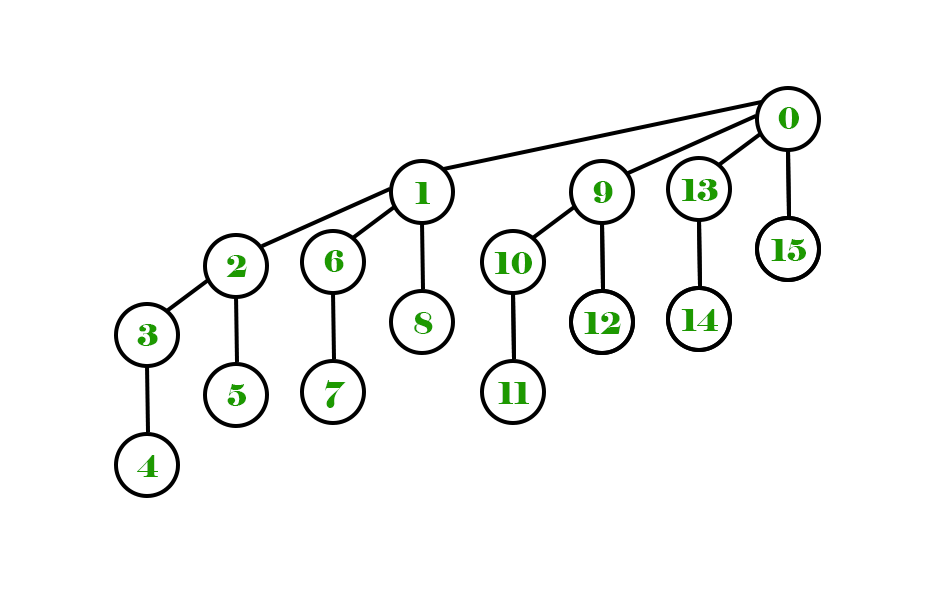
<style>
.page{position:relative;width:932px;height:592px;background:#ffffff}
.page>*{position:absolute;margin:0}
.t1{font:30px "Elephant-Regular";color:#1d9900}
</style>
<div class="page">
<p class="t1" style="left:778px;top:107px;width:21px;height:22px">0</p>
<p class="t1" style="left:415px;top:182px;width:15px;height:22px">1</p>
<p class="t1" style="left:593px;top:181px;width:20px;height:22px">9</p>
<p class="t1" style="left:681px;top:179px;width:37px;height:22px">13</p>
<p class="t1" style="left:771px;top:239px;width:35px;height:22px">15</p>
<p class="t1" style="left:226px;top:255px;width:21px;height:22px">2</p>
<p class="t1" style="left:324px;top:250px;width:20px;height:22px">6</p>
<p class="t1" style="left:494px;top:252px;width:38px;height:22px">10</p>
<p class="t1" style="left:414px;top:312px;width:19px;height:22px">8</p>
<p class="t1" style="left:584px;top:312px;width:37px;height:22px">12</p>
<p class="t1" style="left:681px;top:309px;width:37px;height:22px">14</p>
<p class="t1" style="left:137px;top:324px;width:21px;height:22px">3</p>
<p class="t1" style="left:227px;top:384px;width:19px;height:22px">5</p>
<p class="t1" style="left:325px;top:380px;width:21px;height:28px">7</p>
<p class="t1" style="left:498px;top:382px;width:31px;height:22px">11</p>
<p class="t1" style="left:137px;top:455px;width:21px;height:22px">4</p>
</div>
